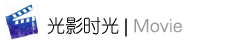
<style>
.page{position:relative;width:250px;height:40px;background:#ffffff}
.page>*{position:absolute;margin:0}
.t1{font:18px "FZY1JW--GB1-0";color:#999999}
.t2{font:18px "FZY1JW--GB1-0";color:#010101}
.t3{font:18px "FZY1JW--GB1-0";color:#030303}
</style>
<div class="page">
<p class="t1" style="left:47px;top:16px;width:135px;height:21px"><span class="t2">光影时光 </span><span class="t3">| </span>Movie</p>
</div>
